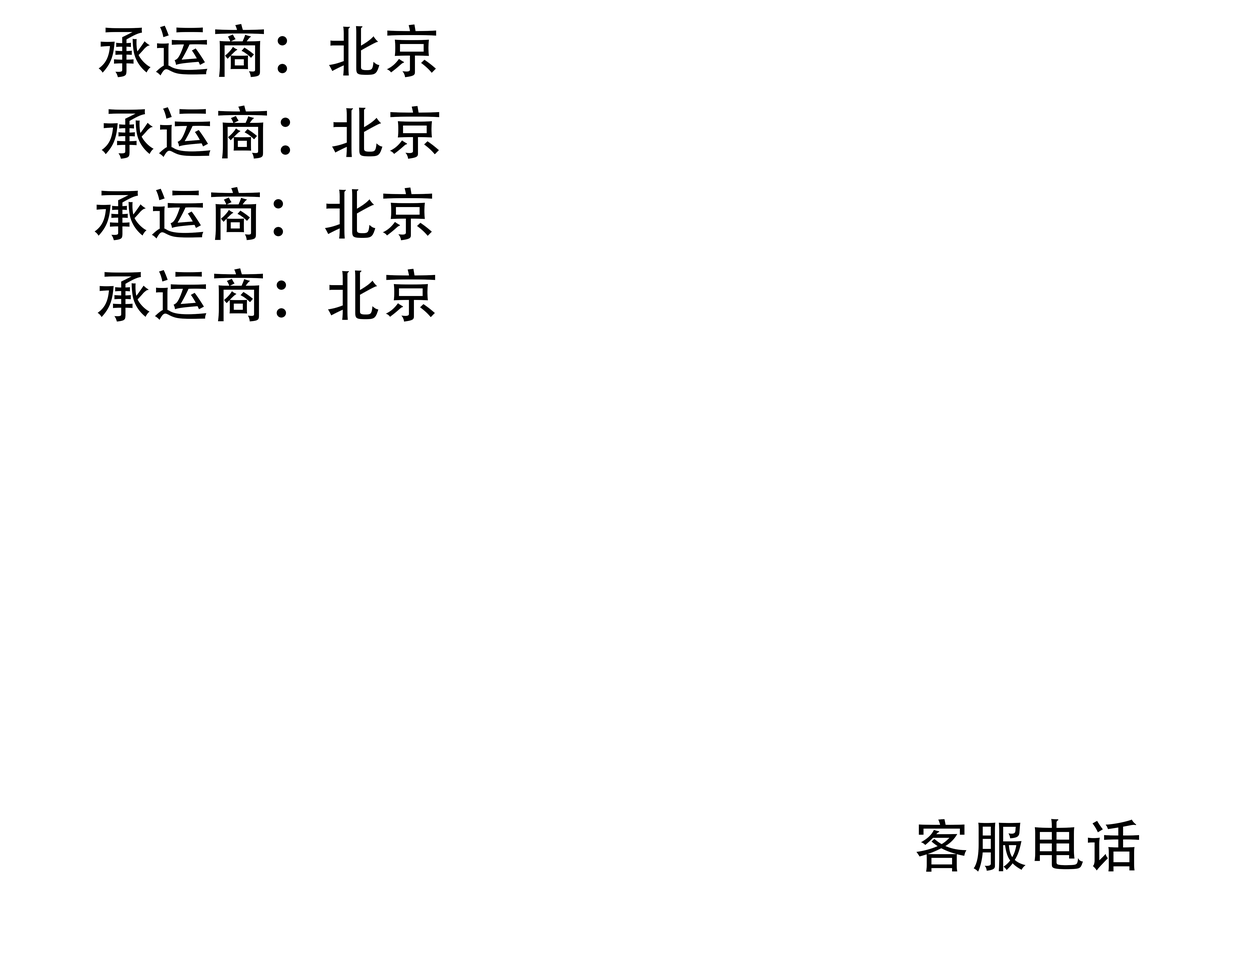
<style>
.page{position:relative;width:1245px;height:958px;background:#ffffff}
.page>*{position:absolute;margin:0}
.t1{font:57.5px "AdobeHeitiStd-Regular";color:#000000}
</style>
<div class="page">
<p class="t1" style="left:99px;top:24px;width:337px;height:53px">承运商：北京</p>
<p class="t1" style="left:102px;top:105px;width:337px;height:54px">承运商：北京</p>
<p class="t1" style="left:94px;top:187px;width:338px;height:53px">承运商：北京</p>
<p class="t1" style="left:98px;top:268px;width:337px;height:54px">承运商：北京</p>
<p class="t1" style="left:916px;top:819px;width:223px;height:53px">客服电话</p>
</div>
